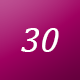
<style>
.page{position:relative;width:80px;height:80px}
.page>*{position:absolute;margin:0}
.t1{font:36px "Cambria-Italic";color:#ffffff}
</style>
<div class="page">
<p class="t1" style="left:21px;top:28px;width:38px;height:24px">30</p>
</div>
